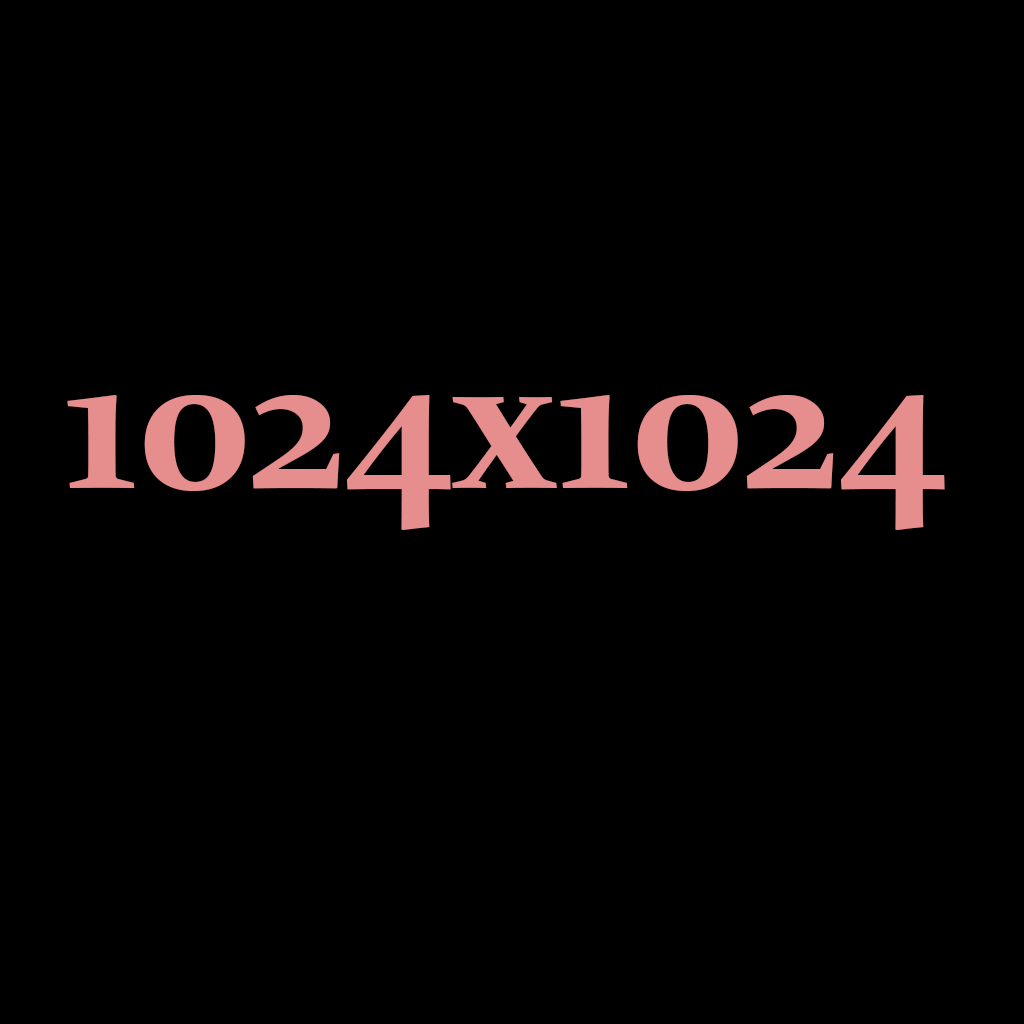
<style>
.page{position:relative;width:1024px;height:1024px;background:#000000}
.page>*{position:absolute;margin:0}
.t1{font:200px "Constantia-Bold";color:#e68d8d}
</style>
<div class="page">
<p class="t1" style="left:67px;top:395px;width:878px;height:136px">1024x1024</p>
</div>
